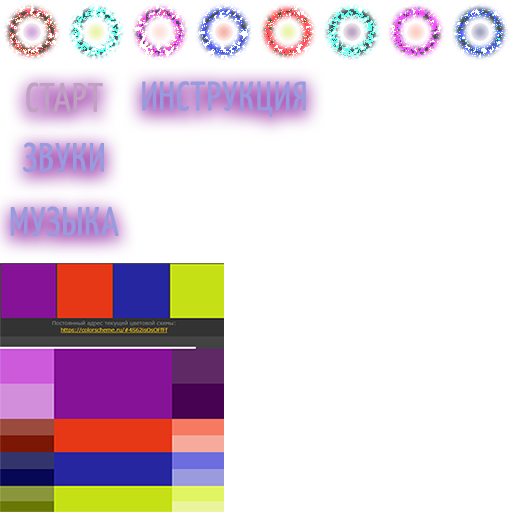
<style>
.page{position:relative;width:512px;height:512px;background:#ffffff}
.page>*{position:absolute;margin:0}
.t1{font:41px "YanoneKaffeesatz-Regular";letter-spacing:0.02em;color:#c0a1c3}
.t2{font:41px "YanoneKaffeesatz-Regular";letter-spacing:0.02em;color:#9a9adf}
</style>
<div class="page">
<p class="t1" style="left:26px;top:82px;width:77px;height:31px">СТАРТ</p>
<p class="t2" style="left:142px;top:81px;width:164px;height:36px">ИНСТРУКЦИЯ</p>
<p class="t2" style="left:23px;top:142px;width:81px;height:31px">ЗВУКИ</p>
<p class="t2" style="left:10px;top:206px;width:109px;height:31px">МУЗЫКА</p>
</div>
